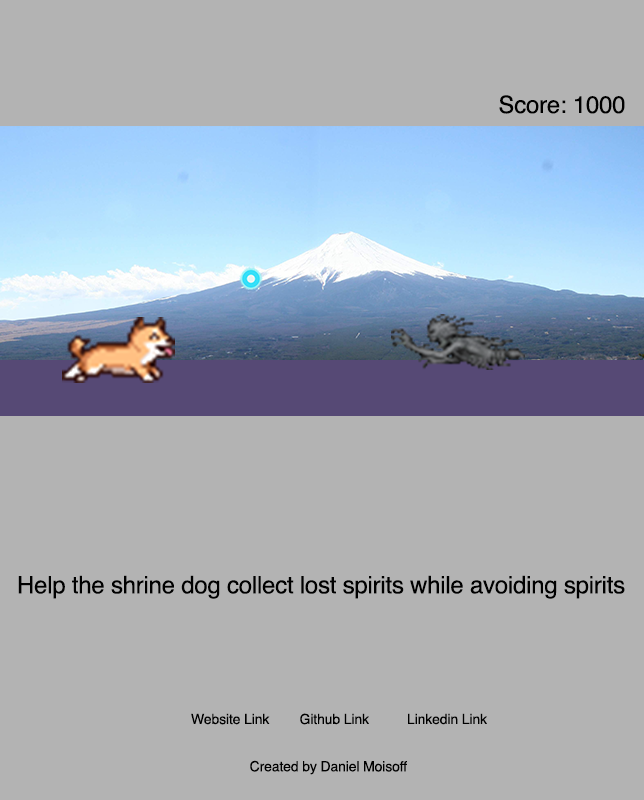
<style>
.page{position:relative;width:644px;height:800px;background:#b3b3b3}
.page>*{position:absolute;margin:0}
.t1{font:24px "Helvetica";letter-spacing:-0.01em;color:#000000}
.t2{font:14px "Helvetica";letter-spacing:-0.01em;color:#000000}
</style>
<div class="page">
<p class="t1" style="left:499px;top:95px;width:126px;height:19px">Score: 1000</p>
<p class="t1" style="left:18px;top:575px;width:607px;height:24px">Help the shrine dog collect lost spirits while avoiding spirits</p>
<p class="t2" style="left:191px;top:713px;width:79px;height:12px">Website Link</p>
<p class="t2" style="left:300px;top:713px;width:69px;height:12px">Github Link</p>
<p class="t2" style="left:408px;top:713px;width:79px;height:12px">Linkedin Link</p>
<p class="t2" style="left:250px;top:760px;width:157px;height:15px">Created by Daniel Moisoff</p>
</div>
